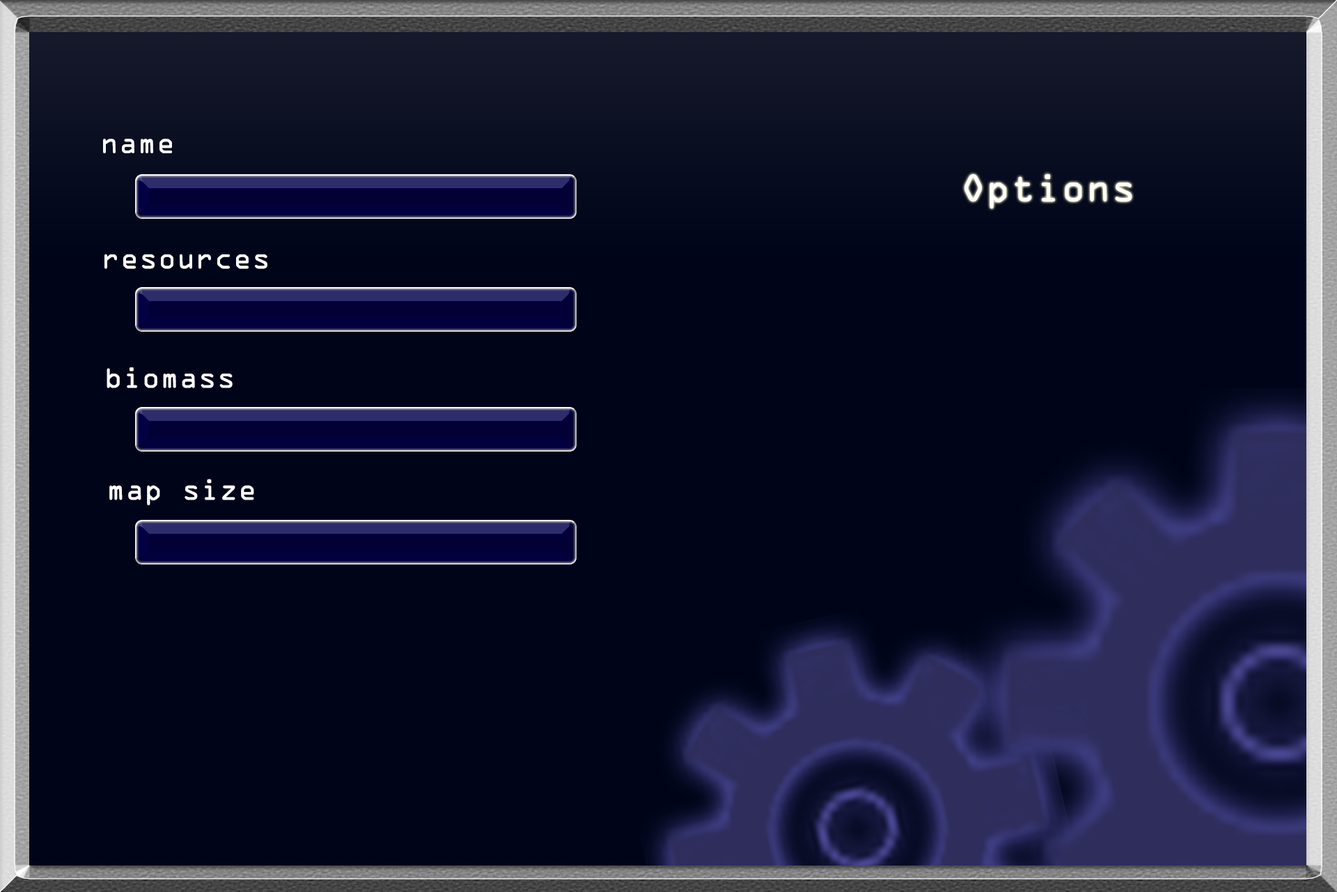
<style>
.page{position:relative;width:1337px;height:892px;background:#000418}
.page>*{position:absolute;margin:0}
.t1{font:26.1px "OCRAStd";color:#ffffff}
.t2{font:34.8px "OCRAStd";color:#ffffff}
</style>
<div class="page">
<p class="t1" style="left:103px;top:139px;width:69px;height:14px">name</p>
<p class="t2" style="left:965px;top:174px;width:168px;height:35px">Options</p>
<p class="t1" style="left:104px;top:254px;width:163px;height:15px">resources</p>
<p class="t1" style="left:107px;top:367px;width:126px;height:21px">biomass</p>
<p class="t1" style="left:109px;top:479px;width:145px;height:26px">map size</p>
</div>
